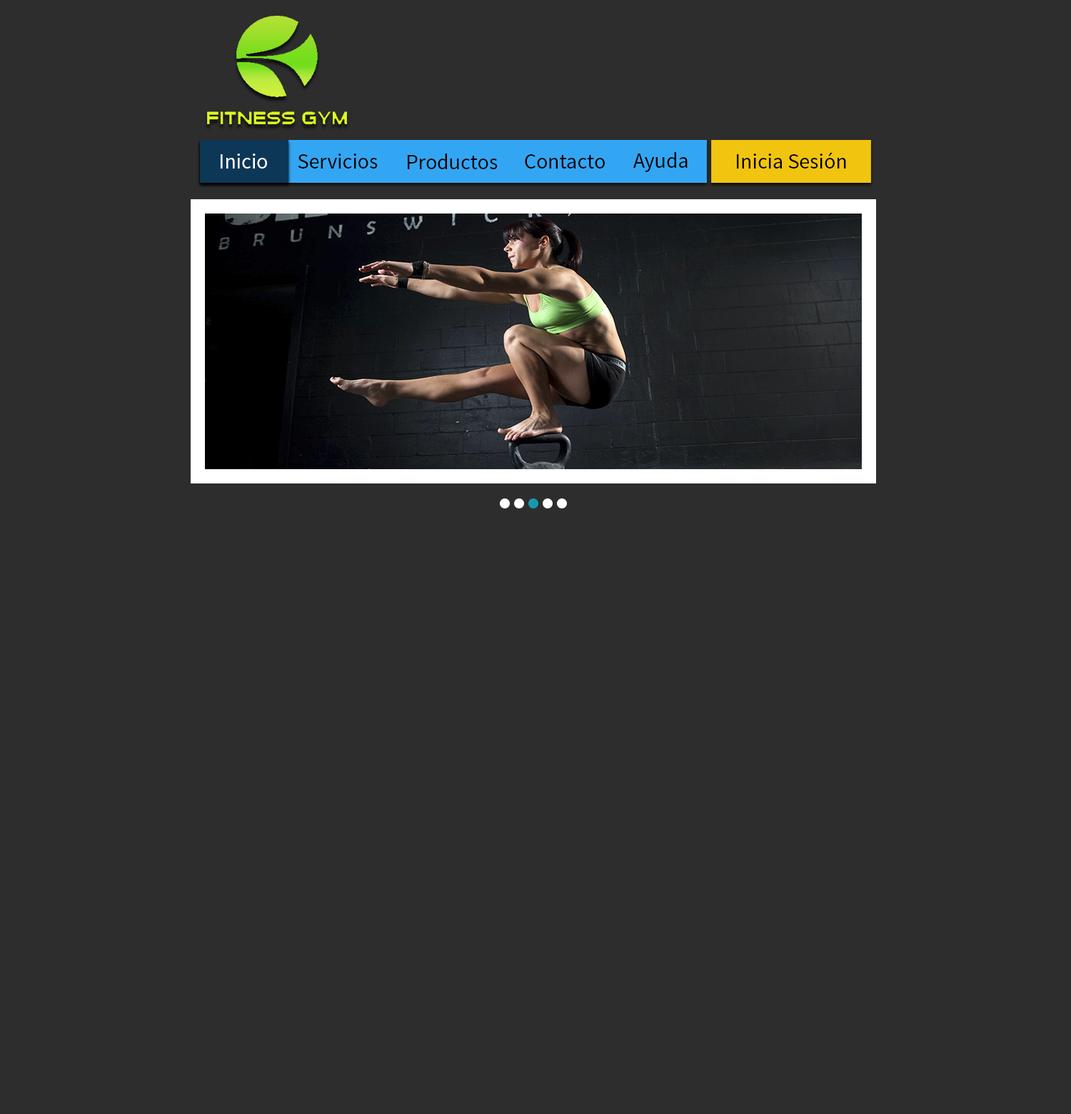
<style>
.page{position:relative;width:1071px;height:1114px;background:#2d2d2d}
.page>*{position:absolute;margin:0}
.t1{font:21.4px "SourceSansPro-Regular";color:#fefefe}
.t2{font:21.4px "SourceSansPro-Regular";color:#000000}
</style>
<div class="page">
<p class="t1" style="left:221px;top:153px;width:46px;height:15px">Inicio</p>
<p class="t2" style="left:298px;top:153px;width:80px;height:15px">Servicios</p>
<p class="t2" style="left:408px;top:153px;width:90px;height:16px">Productos</p>
<p class="t2" style="left:525px;top:154px;width:80px;height:14px">Contacto</p>
<p class="t2" style="left:633px;top:152px;width:54px;height:20px">Ayuda</p>
<p class="t2" style="left:737px;top:153px;width:109px;height:15px">Inicia Sesión</p>
</div>
